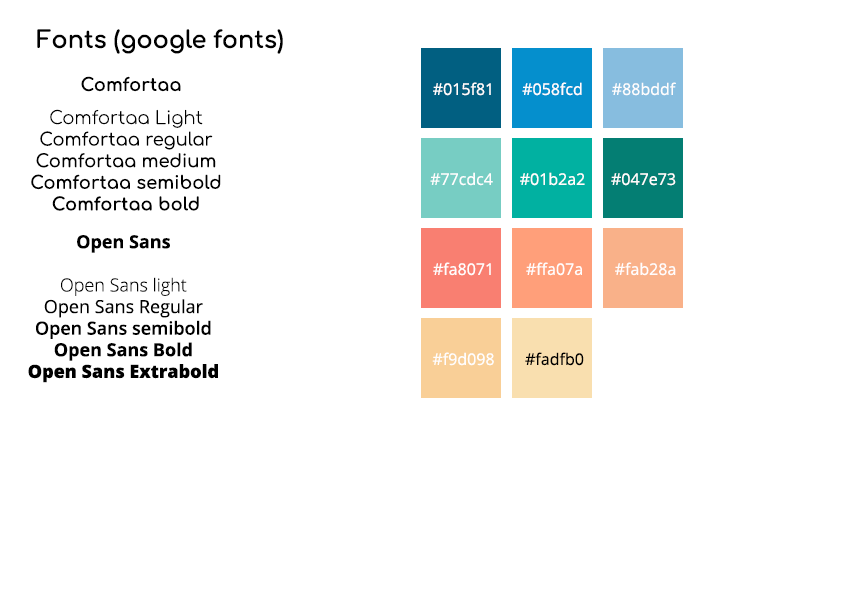
<style>
.page{position:relative;width:842px;height:595px;background:#ffffff}
.page>*{position:absolute;margin:0}
.t1{font:24px "Comfortaa-Bold";color:#000000}
.t2{font:18px "Comfortaa-Bold";color:#000000}
.t3{font:16px "OpenSans-Regular";color:#fffefe}
.t4{font:18px "Comfortaa-SemiBold";color:#000000}
.t5{font:18px "Comfortaa-Light";color:#000000}
.t6{font:18px "Comfortaa-Regular";color:#000000}
.t7{font:18px "Comfortaa-Medium";color:#000000}
.t8{font:18px "OpenSans-ExtraBold";color:#000000}
.t9{font:18px "OpenSans-Bold";color:#000000}
.t10{font:18px "OpenSans-Light";color:#000000}
.t11{font:18px "OpenSans-Regular";color:#000000}
.t12{font:18px "OpenSans-SemiBold";color:#000000}
.t13{font:16px "OpenSans-Regular";color:#000000}
</style>
<div class="page">
<p class="t1" style="left:37px;top:29px;width:246px;height:25px">Fonts (google fonts)</p>
<p class="t2" style="left:81px;top:76px;width:100px;height:16px">Comfortaa</p>
<p class="t3" style="left:433px;top:82px;width:58px;height:14px">#015f81</p>
<p class="t3" style="left:522px;top:82px;width:60px;height:14px">#058fcd</p>
<p class="t3" style="left:612px;top:82px;width:64px;height:14px">#88bddf</p>
<p class="t4" style="left:31px;top:109px;width:190px;height:102px;text-align:center"><span class="t5">Comfortaa Light<br></span><span class="t6">Comfortaa regular<br></span><span class="t7">Comfortaa medium<br></span>Comfortaa semibold<br><span class="t2">Comfortaa bold</span></p>
<p class="t3" style="left:430px;top:172px;width:63px;height:14px">#77cdc4</p>
<p class="t3" style="left:520px;top:172px;width:65px;height:14px">#01b2a2</p>
<p class="t3" style="left:611px;top:173px;width:65px;height:13px">#047e73</p>
<p class="t8" style="left:28px;top:235px;width:190px;height:148px;text-align:center"><span class="t9">Open Sans<br><br></span><span class="t10">Open Sans light<br></span><span class="t11">Open Sans Regular<br></span><span class="t12">Open Sans semibold<br></span><span class="t9">Open Sans Bold<br></span>Open Sans Extrabold</p>
<p class="t3" style="left:433px;top:262px;width:58px;height:14px">#fa8071</p>
<p class="t3" style="left:526px;top:262px;width:56px;height:14px">#ffa07a</p>
<p class="t3" style="left:615px;top:262px;width:61px;height:14px">#fab28a</p>
<p class="t3" style="left:432px;top:352px;width:62px;height:14px">#f9d098</p>
<p class="t13" style="left:525px;top:352px;width:59px;height:14px">#fadfb0</p>
</div>
